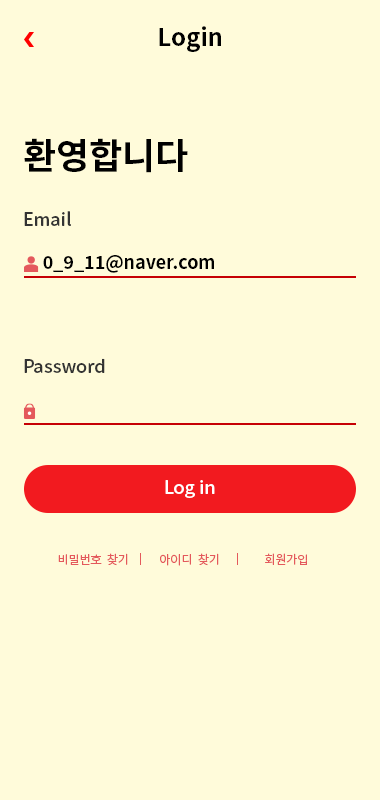
<style>
.page{position:relative;width:380px;height:800px;background:#fffbda}
.page>*{position:absolute;margin:0}
.t1{font:24px "NotoSansKR-Bold";color:#000000}
.t2{font:36px "NotoSansKR-Bold";color:#000000}
.t3{font:18px "NotoSansKR-Medium";color:#333333}
.t4{font:18px "NotoSansKR-Regular";color:#333333}
.t5{font:18px "NotoSansKR-Bold";color:#000000}
.t6{font:18px "NotoSansKR-Medium";color:#ffffff}
.t7{font:18px "NotoSansKR-Regular";color:#ffffff}
.t8{font:12px "NotoSansKR-Regular";color:#e4595c}
</style>
<div class="page">
<p class="t1" style="left:159px;top:26px;width:62px;height:26px">Login</p>
<p class="t2" style="left:24px;top:138px;width:164px;height:35px">환영합니다</p>
<p class="t3" style="left:24px;top:211px;width:47px;height:15px"><span class="t4"><br></span>Email</p>
<p class="t5" style="left:43px;top:255px;width:171px;height:18px">0_9_11@naver.com</p>
<p class="t3" style="left:24px;top:358px;width:81px;height:15px"><span class="t4"><br></span>Password</p>
<p class="t6" style="left:165px;top:480px;width:50px;height:18px"><span class="t7"><br></span>Log in</p>
<p class="t8" style="left:58px;top:553px;width:70px;height:13px">비밀번호  찾기</p>
<p class="t8" style="left:160px;top:553px;width:59px;height:13px">아이디  찾기</p>
<p class="t8" style="left:265px;top:553px;width:42px;height:12px">회원가입</p>
</div>
